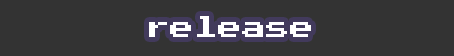
<style>
.page{position:relative;width:454px;height:56px;background:#333333}
.page>*{position:absolute;margin:0}
.t1{font:24px "PressStart2P";color:#ffffff}
</style>
<div class="page">
<p class="t1" style="left:149px;top:16px;width:162px;height:21px">release</p>
</div>
